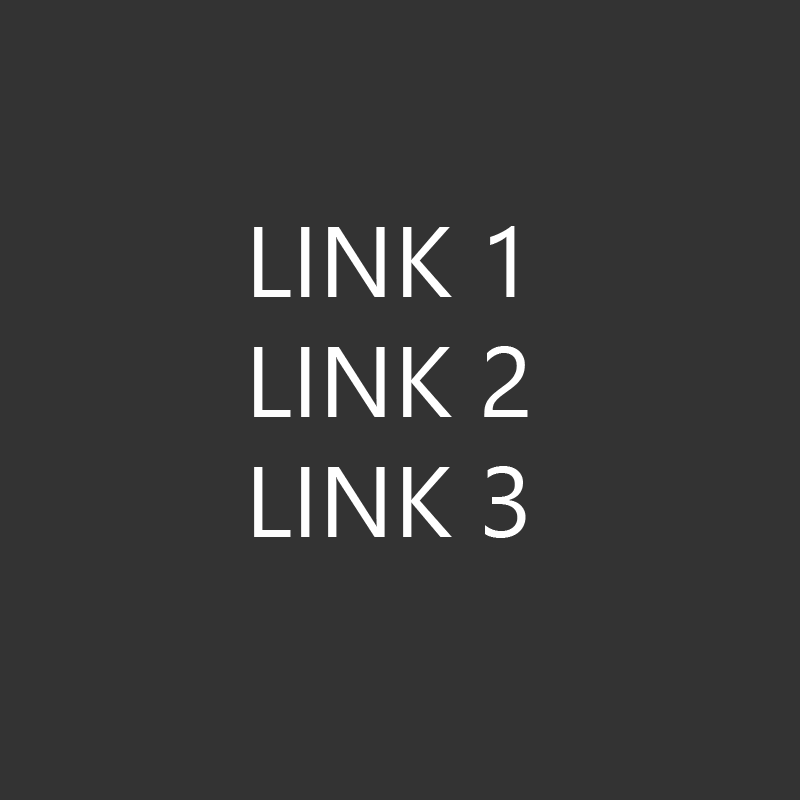
<style>
.page{position:relative;width:800px;height:800px;background:#333333}
.page>*{position:absolute;margin:0}
.t1{font:100px "SegoeUIHistoric";color:#ffffff}
</style>
<div class="page">
<p class="t1" style="left:254px;top:226px;width:274px;height:312px;text-align:center">LINK 1<br>LINK 2<br>LINK 3</p>
</div>
